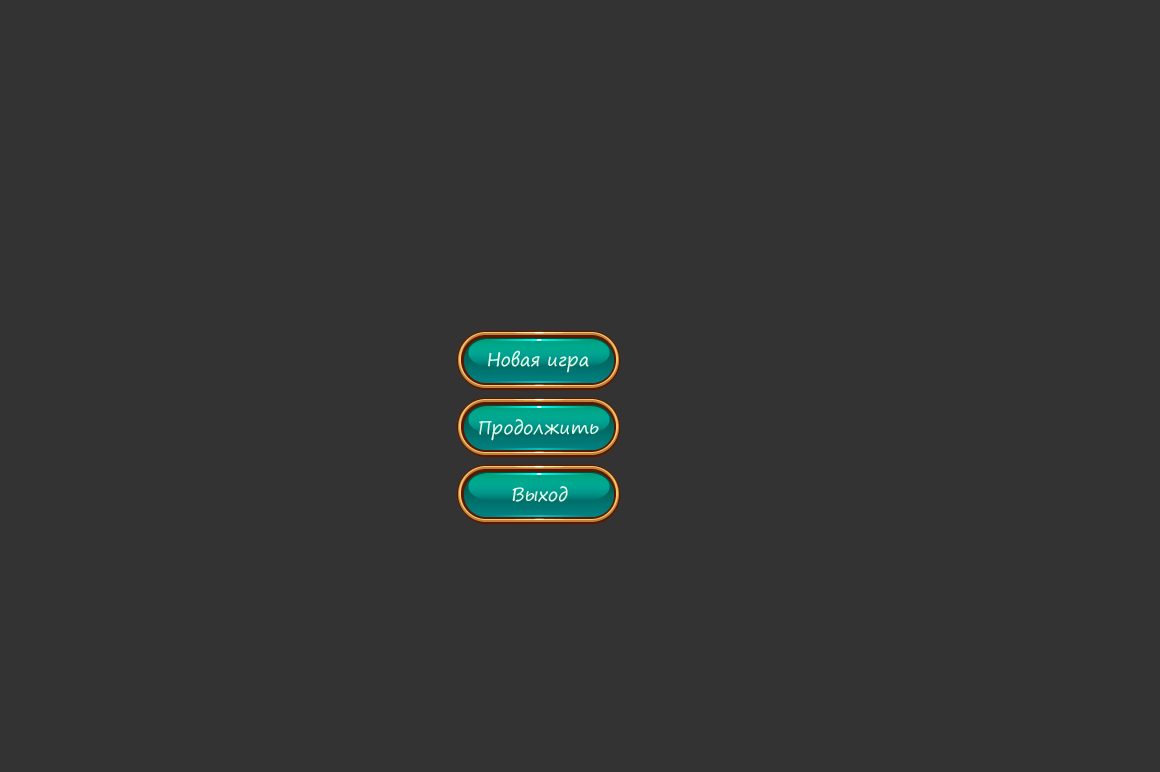
<style>
.page{position:relative;width:1160px;height:772px;background:#333333}
.page>*{position:absolute;margin:0}
.t1{font:18px "SegoePrint";color:#dbffec}
</style>
<div class="page">
<p class="t1" style="left:488px;top:350px;width:101px;height:23px">Новая игра</p>
<p class="t1" style="left:479px;top:419px;width:120px;height:22px">Продолжить</p>
<p class="t1" style="left:512px;top:486px;width:56px;height:16px">Выход</p>
</div>
